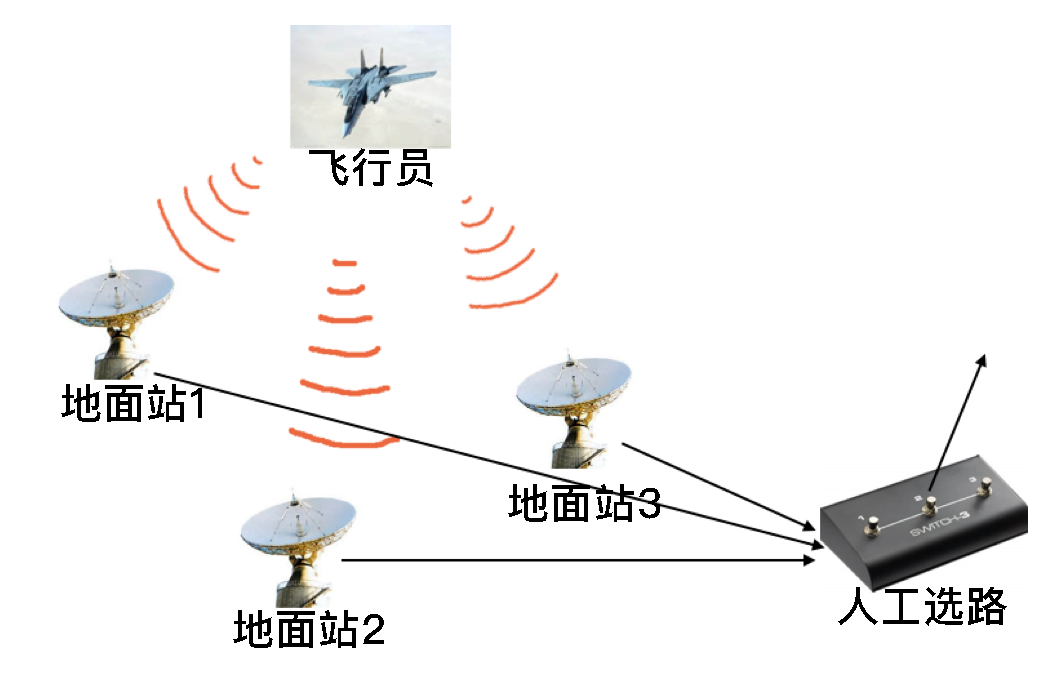
<style>
.page{position:relative;width:1060px;height:675px;background:#ffffff}
.page>*{position:absolute;margin:0}
.t1{font:41.7px "PingFangSC-Medium";letter-spacing:0.025em;color:#000000}
</style>
<div class="page">
<p class="t1" style="left:309px;top:148px;width:124px;height:39px">飞行员</p>
<p class="t1" style="left:61px;top:384px;width:141px;height:38px">地面站1</p>
<p class="t1" style="left:508px;top:484px;width:152px;height:38px">地面站3</p>
<p class="t1" style="left:838px;top:587px;width:169px;height:39px">人工选路</p>
<p class="t1" style="left:233px;top:610px;width:151px;height:38px">地面站2</p>
</div>
